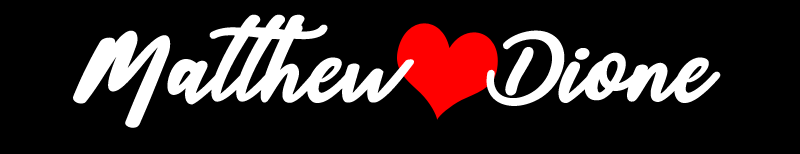
<style>
.page{position:relative;width:800px;height:154px;background:#000000}
.page>*{position:absolute;margin:0}
.t1{font:96px "sophia-script";letter-spacing:-0.01em;color:#ffffff}
</style>
<div class="page">
<p class="t1" style="left:73px;top:14px;width:648px;height:114px">Matthew    Dione</p>
</div>
